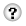
<style>
.page{position:relative;width:26px;height:26px;background:#ffffff}
.page>*{position:absolute;margin:0}
.t1{font:15.9px "Fixedsys";color:#000000;scale:1.1 1}
</style>
<div class="page">
<p class="t1" style="left:8px;top:7px;width:9px;height:12px">?</p>
</div>
